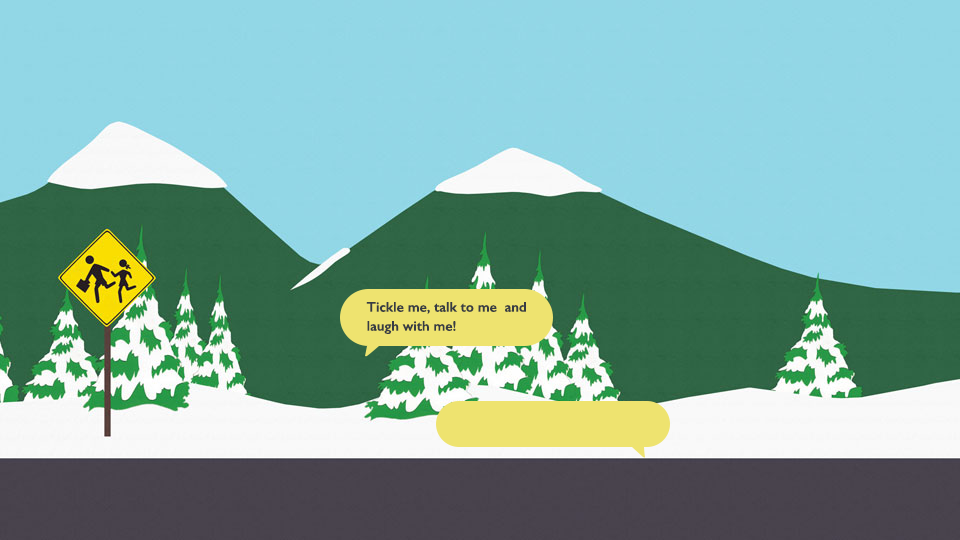
<style>
.page{position:relative;width:960px;height:540px;background:#92d7e6}
.page>*{position:absolute;margin:0}
.t1{font:14px/19px "GillSans-SemiBold";color:#373c44}
</style>
<div class="page">
<p class="t1" style="left:366px;top:302px;width:160px;height:32px">Tickle me, talk to me  and <br>laugh with me!</p>
</div>
